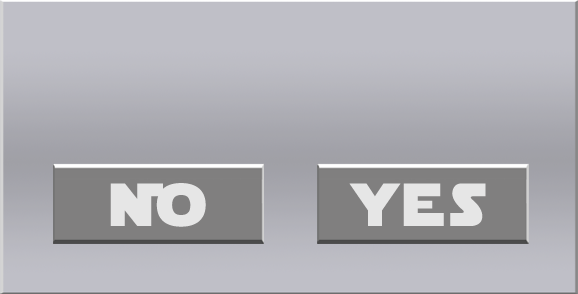
<style>
.page{position:relative;width:578px;height:294px;background:#bfbfc7}
.page>*{position:absolute;margin:0}
.t1{font:60px "StarJedi";color:#e6e6e6}
</style>
<div class="page">
<p class="t1" style="left:110px;top:183px;width:96px;height:44px">N o</p>
<p class="t1" style="left:349px;top:183px;width:137px;height:43px">y e s</p>
</div>
